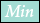
<style>
.page{position:relative;width:40px;height:23px;background:#a3dcd3}
.page>*{position:absolute;margin:0}
.t1{font:18px "MinionPro-MediumIt";color:#ffffff}
</style>
<div class="page">
<p class="t1" style="left:4px;top:5px;width:30px;height:13px">Min</p>
</div>
